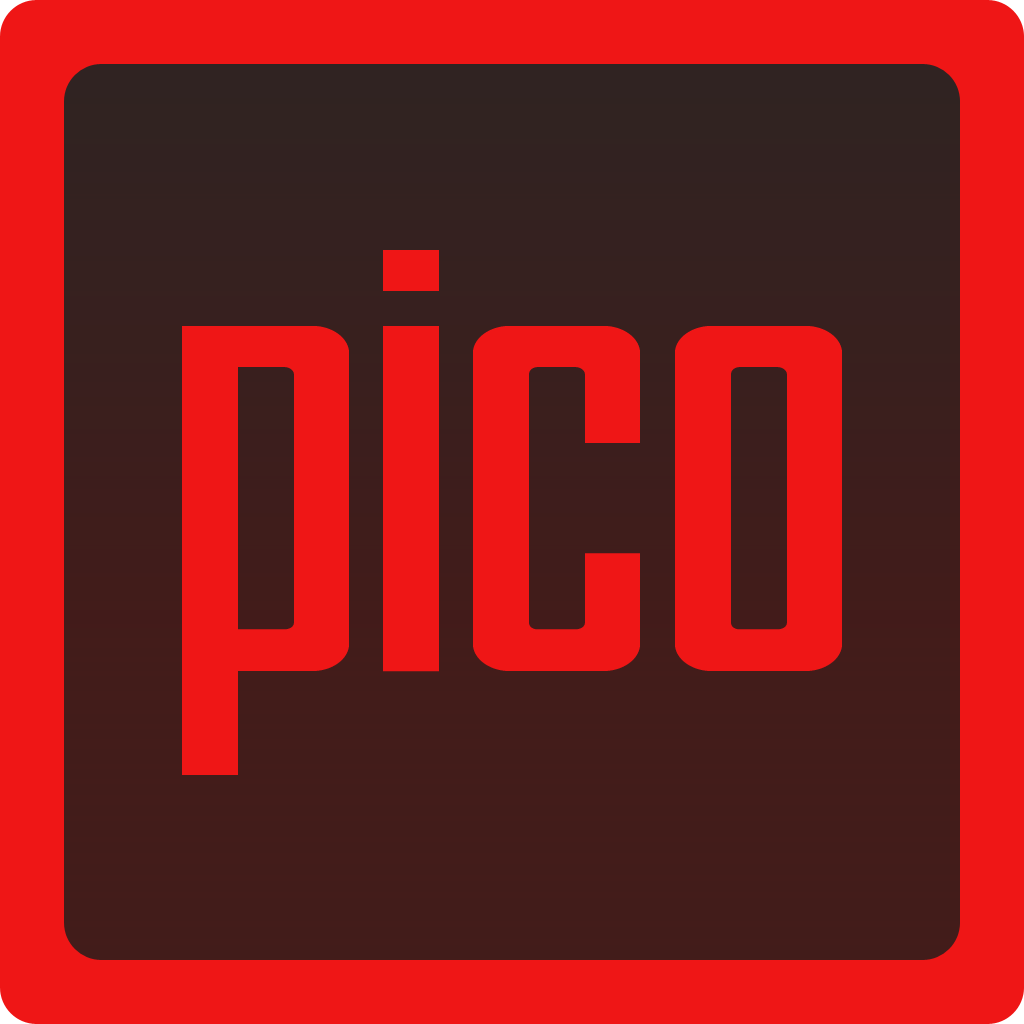
<style>
.page{position:relative;width:1024px;height:1024px;background:#ef1616}
.page>*{position:absolute;margin:0}
.t1{font:650px "Enfatica-Normal";letter-spacing:-0.025em;color:#ef1616;scale:1.34 1}
</style>
<div class="page">
<p class="t1" style="left:182px;top:250px;width:660px;height:525px">pico</p>
</div>
